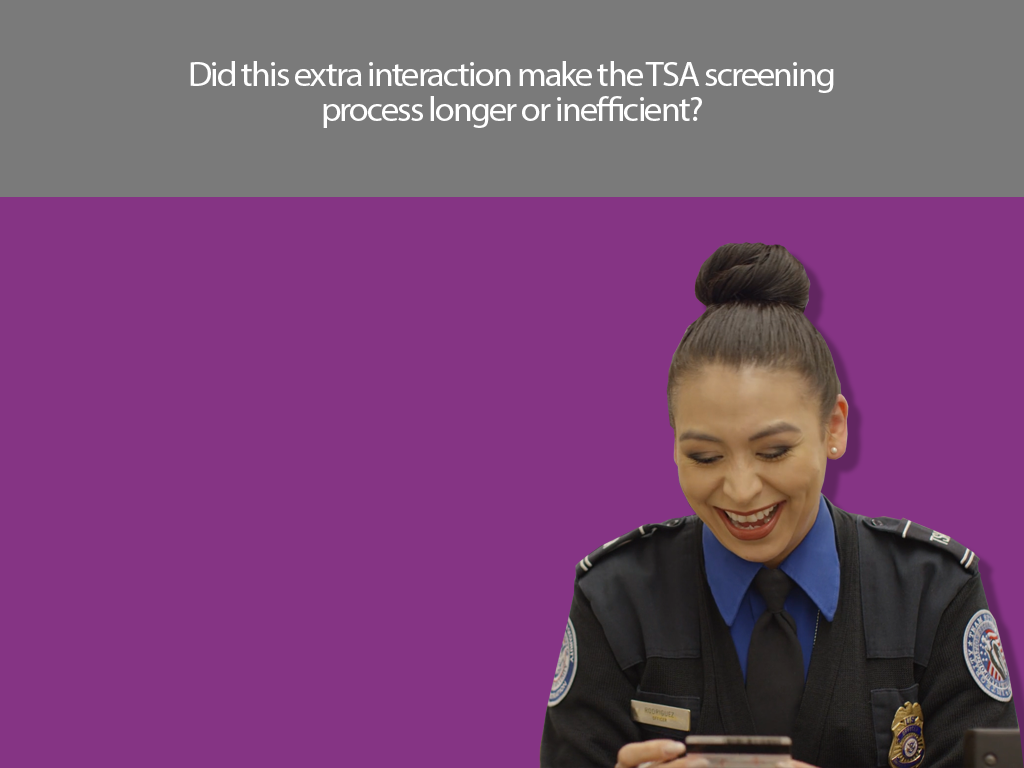
<style>
.page{position:relative;width:1024px;height:768px;background:#853484}
.page>*{position:absolute;margin:0}
.t1{font:34.5px/34.5px "MyriadPro-Regular";letter-spacing:-0.05em;color:#ffffff;scale:1.04 1}
</style>
<div class="page">
<p class="t1" style="left:190px;top:61px;width:644px;height:67px;text-align:center">Did this extra interaction make the TSA screening process longer or inefficient?</p>
</div>
